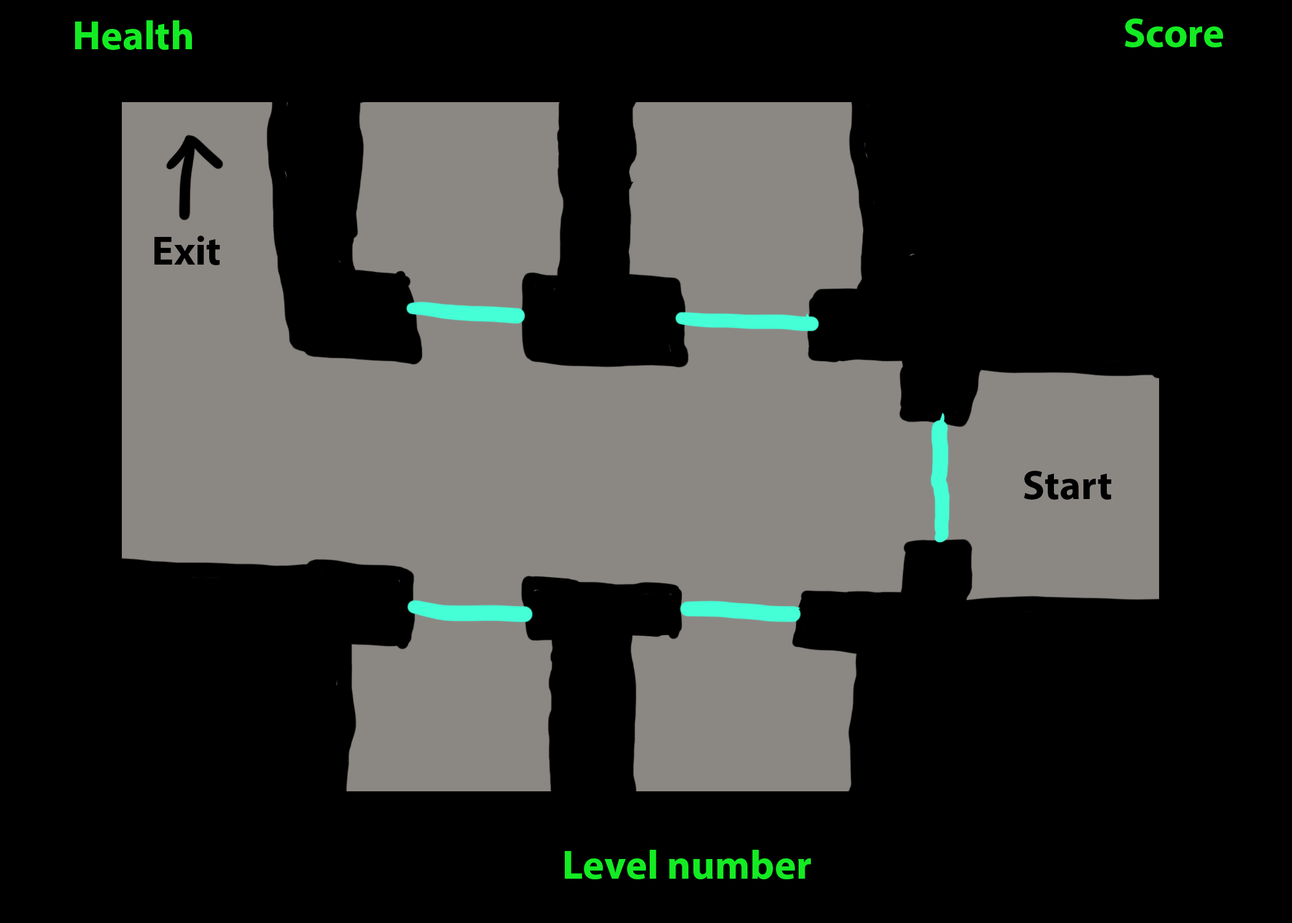
<style>
.page{position:relative;width:1292px;height:923px;background:#000000}
.page>*{position:absolute;margin:0}
.t1{font:41px "MyriadPro-Bold";color:#14eb23}
.t2{font:41px "MyriadPro-Bold";color:#000000}
</style>
<div class="page">
<p class="t1" style="left:75px;top:20px;width:117px;height:30px">Health</p>
<p class="t1" style="left:1125px;top:18px;width:98px;height:29px">Score</p>
<p class="t2" style="left:154px;top:236px;width:66px;height:29px">Exit</p>
<p class="t2" style="left:1024px;top:471px;width:88px;height:29px">Start</p>
<p class="t1" style="left:565px;top:850px;width:246px;height:29px">Level number</p>
</div>
